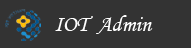
<style>
.page{position:relative;width:191px;height:48px;background:#333333}
.page>*{position:absolute;margin:0}
.t1{font:22.7px "MonotypeCorsiva";color:#ffffff}
</style>
<div class="page">
<p class="t1" style="left:55px;top:15px;width:98px;height:19px">IOT  Admin</p>
</div>
